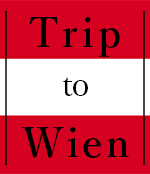
<style>
.page{position:relative;width:150px;height:174px;background:#d60021}
.page>*{position:absolute;margin:0}
.t1{font:40px "YuMin-Demibold";letter-spacing:0.1em;color:#000000}
.t2{font:32px "YuMin-Medium";color:#000000}
</style>
<div class="page">
<p class="t1" style="left:29px;top:17px;width:91px;height:40px">Trip</p>
<p class="t2" style="left:62px;top:77px;width:26px;height:19px">to</p>
<p class="t1" style="left:22px;top:127px;width:107px;height:31px">Wien</p>
</div>
